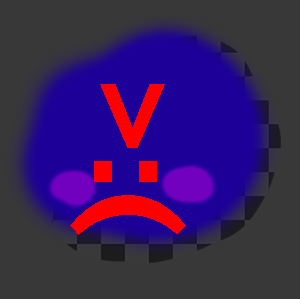
<style>
.page{position:relative;width:300px;height:299px;background:#383838}
.page>*{position:absolute;margin:0}
.t1{font:118.4px "BentonSans-Bold";letter-spacing:0.005em;color:#ff0000}
</style>
<div class="page">
<p class="t1" style="left:70px;top:84px;width:116px;height:151px;rotate:90deg">&gt;:(</p>
</div>
